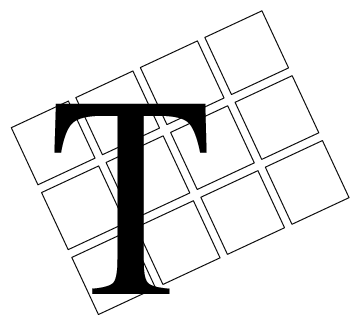
<style>
.page{position:relative;width:360px;height:326px;background:#ffffff}
.page>*{position:absolute;margin:0}
.t1{font:287.5px "Times-Roman";color:#000000;scale:0.92 1}
</style>
<div class="page">
<p class="t1" style="left:54px;top:103px;width:153px;height:191px">T</p>
</div>
